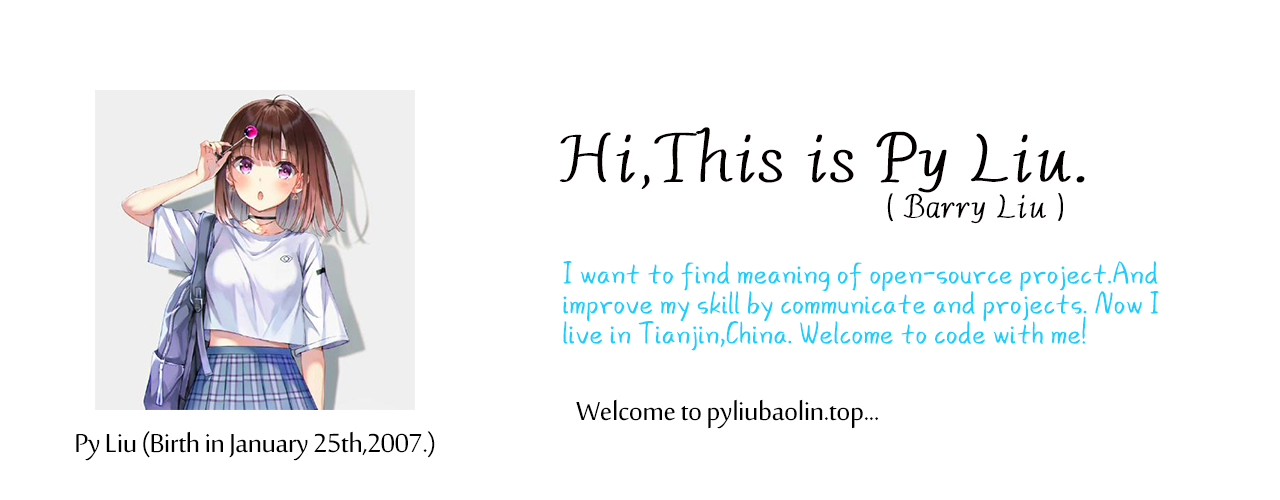
<style>
.page{position:relative;width:1280px;height:500px;background:#ffffff}
.page>*{position:absolute;margin:0}
.t1{font:72px "AaZuimeideshishiniNon-CommercialUse";letter-spacing:-0.02em;color:#040000}
.t2{font:35.4px "AaZuimeideshishiniNon-CommercialUse";letter-spacing:-0.02em;color:#040000}
.t3{font:36px/30px "WanNengLianAiZaHuoDian";letter-spacing:-0.02em;color:#18cffd}
.t4{font:36px "SakkalMajalla";letter-spacing:-0.02em;color:#000000}
</style>
<div class="page">
<p class="t1" style="left:559px;top:127px;width:526px;height:66px">Hi,This is Py Liu.</p>
<p class="t2" style="left:887px;top:193px;width:176px;height:31px">( Barry Liu )</p>
<p class="t3" style="left:563px;top:261px;width:596px;height:90px">I want to find meaning of open-source project.And<br>improve my skill by communicate and projects. Now I<br>live in Tianjin,China. Welcome to code with me!</p>
<p class="t4" style="left:576px;top:399px;width:303px;height:30px">Welcome to pyliubaolin.top...</p>
<p class="t4" style="left:76px;top:431px;width:359px;height:30px">Py Liu (Birth in January 25th,2007.)</p>
</div>
